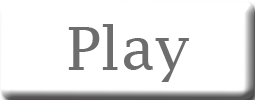
<style>
.page{position:relative;width:255px;height:100px;background:#ffffff}
.page>*{position:absolute;margin:0}
.t1{font:60px "LucidaFax";color:#6d6d6d}
</style>
<div class="page">
<p class="t1" style="left:68px;top:24px;width:121px;height:58px">Play</p>
</div>
